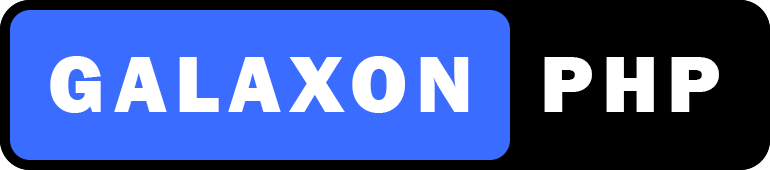
<style>
.page{position:relative;width:770px;height:170px;background:#396cff}
.page>*{position:absolute;margin:0}
.t1{font:83.3px "FranklinGothic-Heavy";letter-spacing:0.1em;color:#ffffff}
</style>
<div class="page">
<p class="t1" style="left:50px;top:56px;width:669px;height:57px">GALAXON  PHP</p>
</div>
